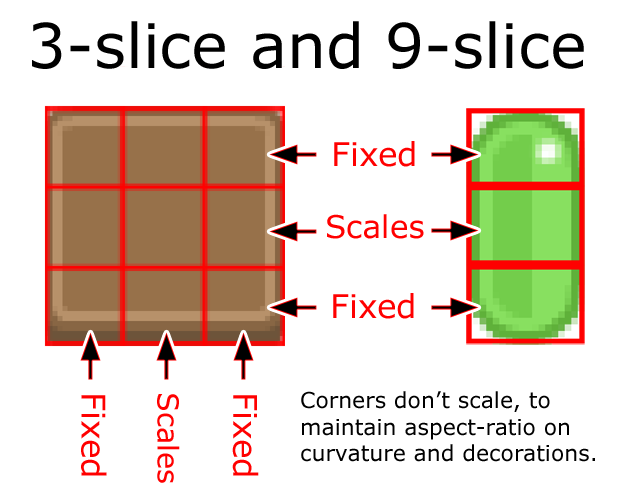
<style>
.page{position:relative;width:642px;height:500px;background:#ffffff}
.page>*{position:absolute;margin:0}
.t1{font:61.5px "Verdana";color:#000000}
.t2{font:32.7px "Verdana";color:#ff0000}
.t3{font:31.2px "Verdana";color:#ff0000}
.t4{font:28.9px "Verdana";color:#ff0000}
.t5{font:22px "Verdana";color:#000000}
</style>
<div class="page">
<p class="t1" style="left:32px;top:21px;width:552px;height:48px">3-slice and 9-slice</p>
<p class="t2" style="left:334px;top:141px;width:81px;height:26px">Fixed</p>
<p class="t3" style="left:327px;top:214px;width:97px;height:25px">Scales</p>
<p class="t2" style="left:333px;top:293px;width:81px;height:26px">Fixed</p>
<p class="t2" style="left:81px;top:395px;width:26px;height:81px;rotate:90deg">Fixed</p>
<p class="t4" style="left:157px;top:394px;width:23px;height:89px;rotate:90deg">Scales</p>
<p class="t2" style="left:232px;top:395px;width:27px;height:81px;rotate:90deg">Fixed</p>
<p class="t5" style="left:301px;top:391px;width:294px;height:71px">Corners don’t scale, to<br>maintain aspect-ratio on <br>curvature and decorations.</p>
</div>
